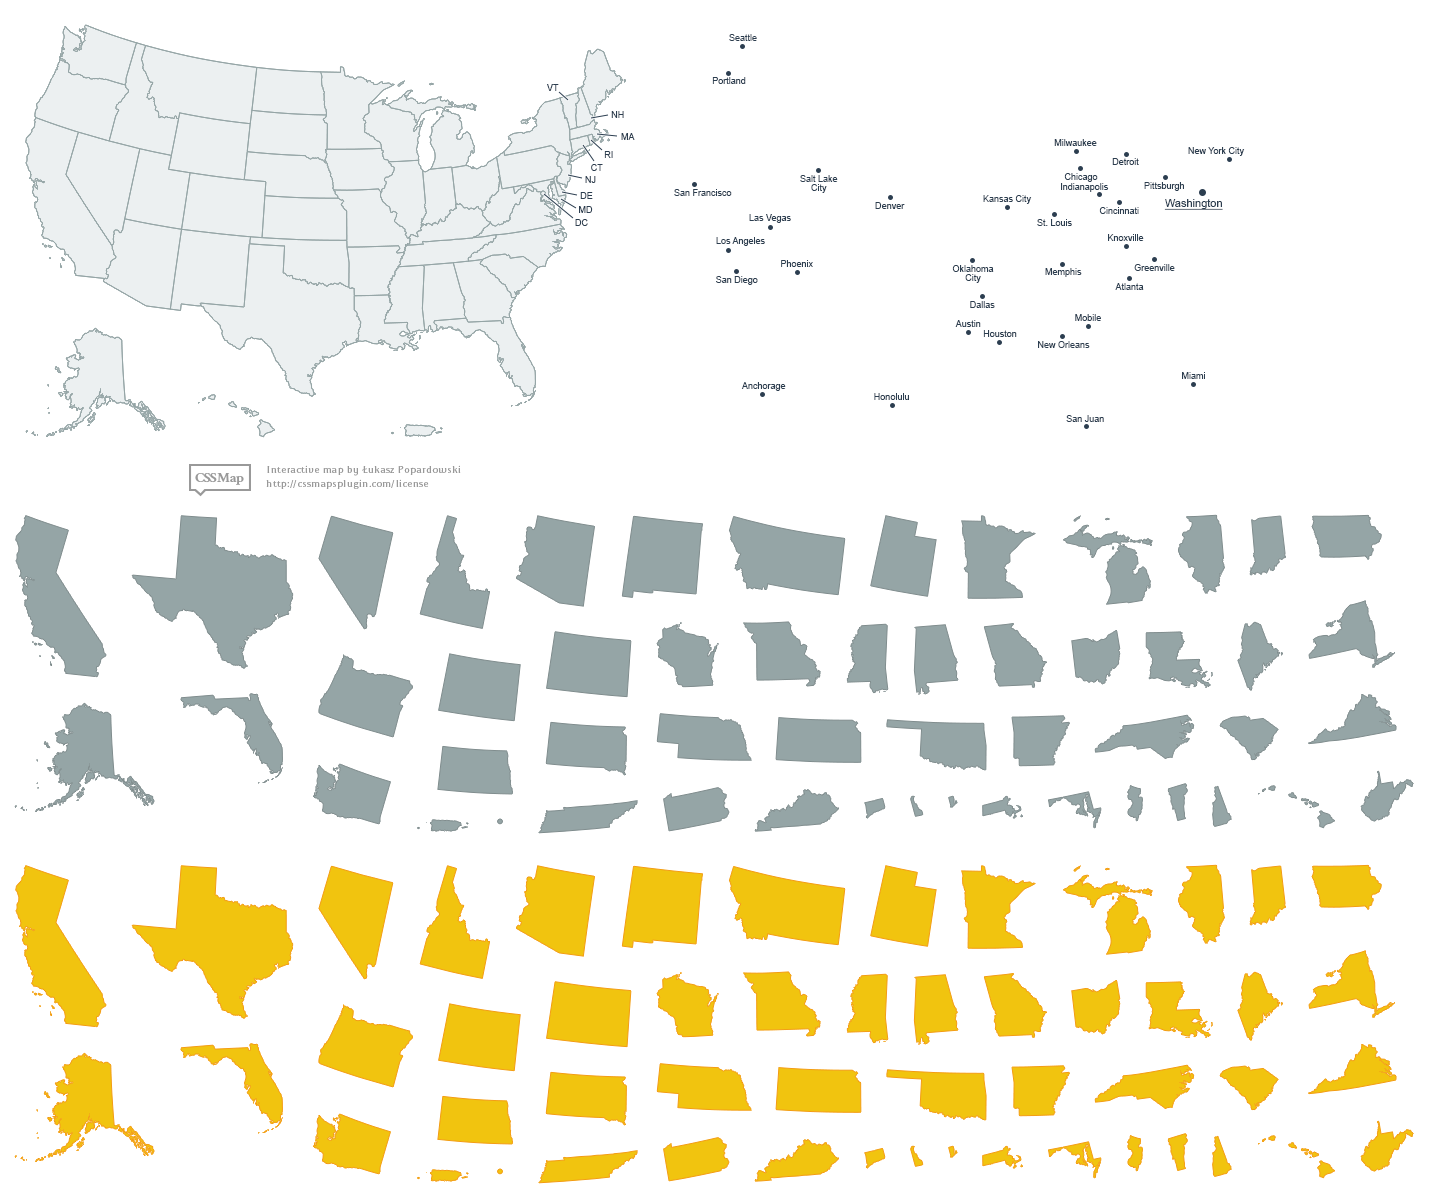
<style>
.page{position:relative;width:1429px;height:1198px;background:#ffffff}
.page>*{position:absolute;margin:0}
.t1{font:9px "ArialMT";color:#2c3e50}
.t2{font:9px/9px "ArialMT";color:#2c3e50}
.t3{font:11px "ArialMT";color:#2c3e50;text-decoration:underline}
</style>
<div class="page">
<p class="t1" style="left:729px;top:34px;width:28px;height:7px">Seattle</p>
<p class="t1" style="left:712px;top:77px;width:34px;height:7px">Portland</p>
<p class="t1" style="left:547px;top:84px;width:12px;height:7px">VT</p>
<p class="t1" style="left:611px;top:111px;width:13px;height:7px">NH</p>
<p class="t1" style="left:621px;top:133px;width:14px;height:7px">MA</p>
<p class="t1" style="left:1054px;top:139px;width:43px;height:7px">Milwaukee</p>
<p class="t1" style="left:1188px;top:147px;width:57px;height:9px">New York City</p>
<p class="t1" style="left:604px;top:151px;width:9px;height:7px">RI</p>
<p class="t1" style="left:1112px;top:158px;width:27px;height:7px">Detroit</p>
<p class="t1" style="left:591px;top:164px;width:12px;height:7px">CT</p>
<p class="t1" style="left:1064px;top:173px;width:34px;height:9px">Chicago</p>
<p class="t1" style="left:585px;top:176px;width:11px;height:7px">NJ</p>
<p class="t2" style="left:800px;top:175px;width:38px;height:18px;text-align:center">Salt Lake<br>City</p>
<p class="t1" style="left:1061px;top:183px;width:48px;height:9px">Indianapolis</p>
<p class="t1" style="left:1144px;top:182px;width:40px;height:9px">Pittsburgh</p>
<p class="t1" style="left:580px;top:192px;width:13px;height:7px">DE</p>
<p class="t1" style="left:674px;top:189px;width:58px;height:7px">San Francisco</p>
<p class="t1" style="left:983px;top:195px;width:49px;height:9px">Kansas City</p>
<p class="t1" style="left:579px;top:206px;width:14px;height:7px">MD</p>
<p class="t1" style="left:875px;top:202px;width:30px;height:7px">Denver</p>
<p class="t1" style="left:1099px;top:207px;width:40px;height:7px">Cincinnati</p>
<p class="t3" style="left:1164px;top:199px;width:59px;height:11px">Washington</p>
<p class="t1" style="left:575px;top:219px;width:13px;height:7px">DC</p>
<p class="t1" style="left:749px;top:214px;width:42px;height:9px">Las Vegas</p>
<p class="t1" style="left:1037px;top:219px;width:35px;height:7px">St. Louis</p>
<p class="t1" style="left:716px;top:237px;width:49px;height:9px">Los Angeles</p>
<p class="t1" style="left:1108px;top:234px;width:36px;height:7px">Knoxville</p>
<p class="t1" style="left:781px;top:260px;width:32px;height:7px">Phoenix</p>
<p class="t2" style="left:952px;top:265px;width:42px;height:18px;text-align:center">Oklahoma<br>City</p>
<p class="t1" style="left:1045px;top:268px;width:37px;height:9px">Memphis</p>
<p class="t1" style="left:1134px;top:264px;width:41px;height:7px">Greenville</p>
<p class="t1" style="left:716px;top:276px;width:42px;height:9px">San Diego</p>
<p class="t1" style="left:1115px;top:283px;width:29px;height:7px">Atlanta</p>
<p class="t1" style="left:970px;top:301px;width:25px;height:7px">Dallas</p>
<p class="t1" style="left:1075px;top:314px;width:26px;height:7px">Mobile</p>
<p class="t1" style="left:955px;top:320px;width:26px;height:7px">Austin</p>
<p class="t1" style="left:983px;top:330px;width:34px;height:7px">Houston</p>
<p class="t1" style="left:1038px;top:341px;width:52px;height:7px">New Orleans</p>
<p class="t1" style="left:1182px;top:372px;width:23px;height:7px">Miami</p>
<p class="t1" style="left:741px;top:382px;width:45px;height:9px">Anchorage</p>
<p class="t1" style="left:874px;top:393px;width:35px;height:7px">Honolulu</p>
<p class="t1" style="left:1066px;top:415px;width:38px;height:7px">San Juan</p>
</div>
